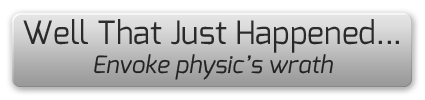
<style>
.page{position:relative;width:425px;height:100px}
.page>*{position:absolute;margin:0}
.t1{font:32px "Exo-Regular";color:#292929}
.t2{font:24px "Exo-Italic";color:#292929}
</style>
<div class="page">
<p class="t1" style="left:23px;top:19px;width:376px;height:61px;text-align:center">Well That Just Happened...<br><span class="t2">Envoke physic’s wrath</span></p>
</div>
